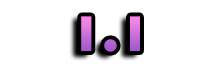
<style>
.page{position:relative;width:223px;height:68px;background:#ffffff}
.page>*{position:absolute;margin:0}
.t1{font:51.5px "STHupo"}
</style>
<div class="page">
<p class="t1" style="left:81px;top:16px;width:59px;height:36px">1.1</p>
</div>
